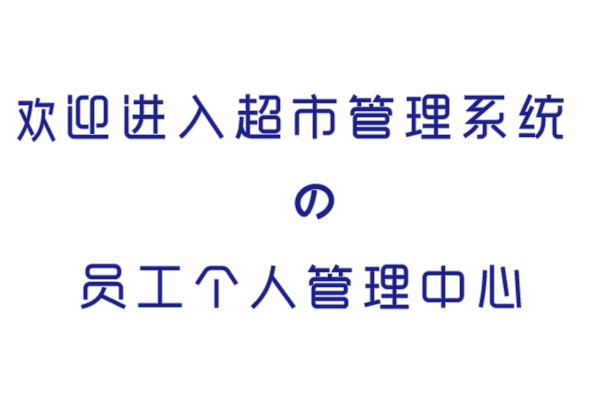
<style>
.page{position:relative;width:600px;height:400px;background:#ffffff}
.page>*{position:absolute;margin:0}
.t1{font:48px/85px "RTWSYueGoDemo-Regular";letter-spacing:0.18em;color:#1d2088}
.t2{font:48px/23px "RTWSYueGoDemo-Regular";letter-spacing:0.18em;color:#1d2088;scale:0.85 1}
.t3{font:48px/85px "RTWSYueGoDemo-Regular";letter-spacing:0.18em;color:#1d2088;font-weight:bold}
</style>
<div class="page">
<p class="t1" style="left:17px;top:94px;width:547px;height:215px"><span class="t2">欢</span>迎进入超市管理系统<br>             <span class="t3">の<br></span>   员工个人管理中心</p>
</div>
